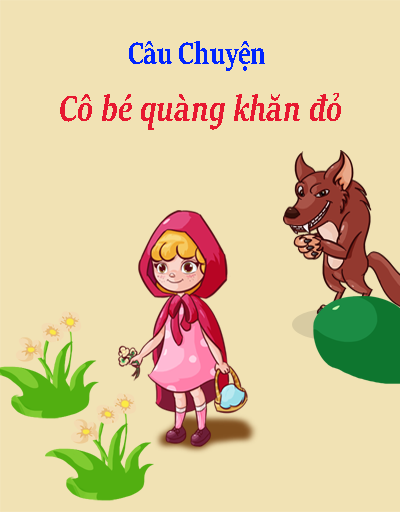
<style>
.page{position:relative;width:400px;height:512px;background:#f1e2b4}
.page>*{position:absolute;margin:0}
.t1{font:34px "SitkaHeading-Bold";color:#0024ff;scale:0.78 1}
.t2{font:40px "SitkaHeading-BoldItalic";color:#e71830;scale:0.78 1}
</style>
<div class="page">
<p class="t1" style="left:129px;top:41px;width:136px;height:30px">Câu Chuyện</p>
<p class="t2" style="left:60px;top:93px;width:281px;height:37px">Cô bé quàng khăn đỏ</p>
</div>
